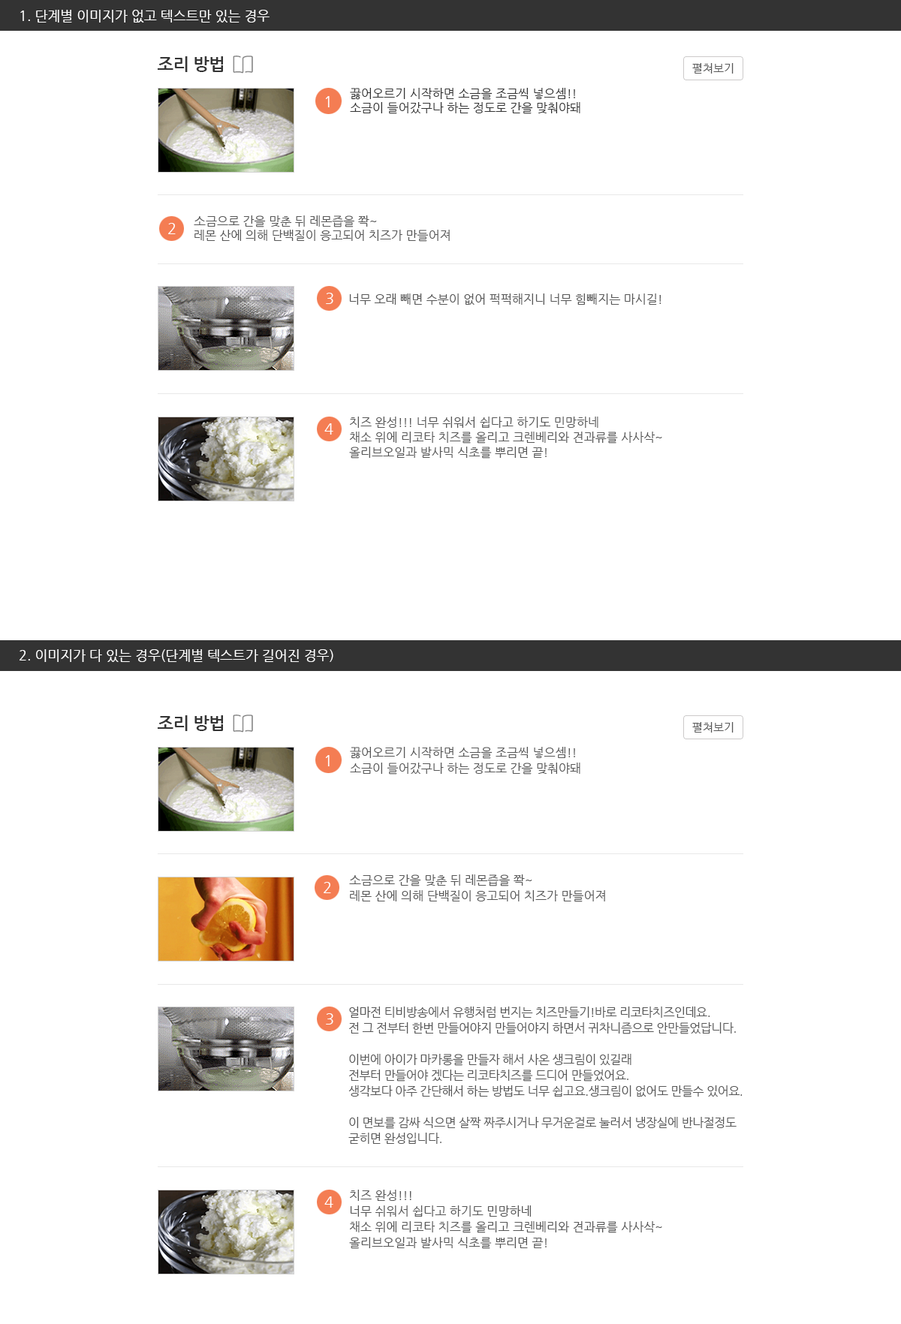
<style>
.page{position:relative;width:901px;height:1324px;background:#ffffff}
.page>*{position:absolute;margin:0}
.t1{font:13.5px "NanumGothic";color:#ffffff}
.t2{font:17.3px "NanumGothicBold";letter-spacing:-0.03em;color:#343434}
.t3{font:11.3px "NanumGothic";color:#585858}
.t4{font:12px "NanumGothic";color:#343434}
.t5{font:15px "NanumGothic";color:#ffffff}
.t6{font:12px "NanumGothic";color:#585858}
.t7{font:12.8px "NanumGothic";color:#585858}
.t8{font:12px/15px "NanumGothic";color:#585858}
.t9{font:12px/15.8px "NanumGothic";color:#585858}
.t10{font:12.8px/15.8px "NanumGothic";color:#585858}
.t11{font:12px/15.8px "NanumGothic";letter-spacing:-0.03em;color:#585858}
</style>
<div class="page">
<p class="t1" style="left:20px;top:10px;width:249px;height:13px">1. 단계별 이미지가 없고 텍스트만 있는 경우</p>
<p class="t2" style="left:157px;top:56px;width:66px;height:16px">조리 방법</p>
<p class="t3" style="left:692px;top:63px;width:41px;height:11px">펼쳐보기</p>
<p class="t4" style="left:350px;top:88px;width:230px;height:26px">끓어오르기 시작하면 소금을 조금씩 넣으셈!!<br>소금이 들어갔구나 하는 정도로 간을 맞춰야돼</p>
<p class="t5" style="left:325px;top:96px;width:4px;height:11px">1</p>
<p class="t6" style="left:194px;top:215px;width:256px;height:27px"><span class="t7">소</span>금으로 간을 맞춘 뒤 레몬즙을 쫙~<br>레몬 산에 의해 단백질이 응고되어 치즈가 만들어져</p>
<p class="t5" style="left:168px;top:223px;width:8px;height:11px">2</p>
<p class="t5" style="left:326px;top:293px;width:7px;height:11px">3</p>
<p class="t6" style="left:349px;top:293px;width:312px;height:12px">너무 오래 빼면 수분이 없어 퍽퍽해지니 너무 힘빼지는 마시길!</p>
<p class="t5" style="left:324px;top:423px;width:9px;height:12px">4</p>
<p class="t8" style="left:349px;top:417px;width:313px;height:42px">치즈 완성!!! 너무 쉬워서 쉽다고 하기도 민망하네<br>채소 위에 리코타 치즈를 올리고 크렌베리와 견과류를 사사삭~<br>올리브오일과 발사믹 식초를 뿌리면 끝!</p>
<p class="t1" style="left:20px;top:649px;width:313px;height:13px">2. 이미지가 다 있는 경우(단계별 텍스트가 길어진 경우)</p>
<p class="t2" style="left:157px;top:715px;width:66px;height:16px">조리 방법</p>
<p class="t3" style="left:692px;top:722px;width:41px;height:11px">펼쳐보기</p>
<p class="t9" style="left:350px;top:747px;width:230px;height:28px">끓어오르기 시작하면 소금을 조금씩 넣으셈!!<br>소금이 들어갔구나 하는 정도로 간을 맞춰야돼</p>
<p class="t5" style="left:325px;top:755px;width:4px;height:11px">1</p>
<p class="t5" style="left:323px;top:882px;width:8px;height:11px">2</p>
<p class="t9" style="left:349px;top:874px;width:256px;height:28px"><span class="t10">소</span>금으로 간을 맞춘 뒤 레몬즙을 쫙~<br>레몬 산에 의해 단백질이 응고되어 치즈가 만들어져</p>
<p class="t5" style="left:326px;top:1013px;width:7px;height:11px">3</p>
<p class="t11" style="left:348px;top:1006px;width:394px;height:138px">얼마전 티비방송에서 유행처럼 번지는 치즈만들기!바로 리코타치즈인데요.<br>전 그 전부터 한번 만들어야지 만들어야지 하면서 귀차니즘으로 안만들었답니다.<br><br>이번에 아이가 마카롱을 만들자 해서 사온 생크림이 있길래<br>전부터 만들어야 겠다는 리코타치즈를 드디어 만들었어요.<br>생각보다 아주 간단해서 하는 방법도 너무 쉽고요.생크림이 없어도 만들수 있어요.<br><br>이 면보를 감싸 식으면 살짝 짜주시거나 무거운걸로 눌러서 냉장실에 반나절정도 <br>굳히면 완성입니다.</p>
<p class="t9" style="left:349px;top:1190px;width:313px;height:59px">치즈 완성!!! <br>너무 쉬워서 쉽다고 하기도 민망하네<br>채소 위에 리코타 치즈를 올리고 크렌베리와 견과류를 사사삭~<br>올리브오일과 발사믹 식초를 뿌리면 끝!</p>
<p class="t5" style="left:324px;top:1196px;width:9px;height:12px">4</p>
</div>
